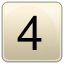
<style>
.page{position:relative;width:64px;height:64px}
.page>*{position:absolute;margin:0}
.t1{font:48px "ArialMT";color:#000000}
</style>
<div class="page">
<p class="t1" style="left:17px;top:15px;width:25px;height:35px">4</p>
</div>
